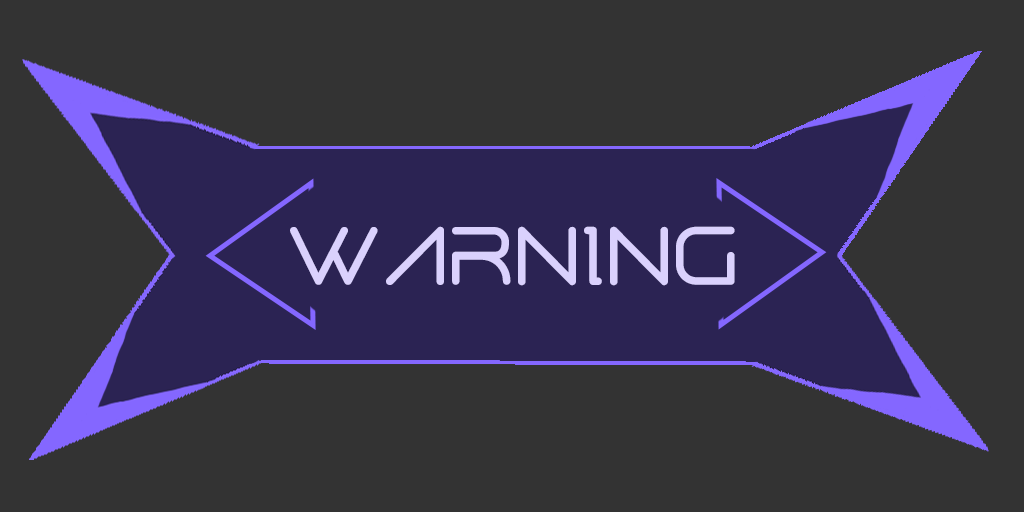
<style>
.page{position:relative;width:1024px;height:512px;background:#333333}
.page>*{position:absolute;margin:0}
.t1{font:83.3px "NeoAtomed-Regular";color:#dad1fd}
</style>
<div class="page">
<p class="t1" style="left:290px;top:226px;width:445px;height:60px">WARNING</p>
</div>
